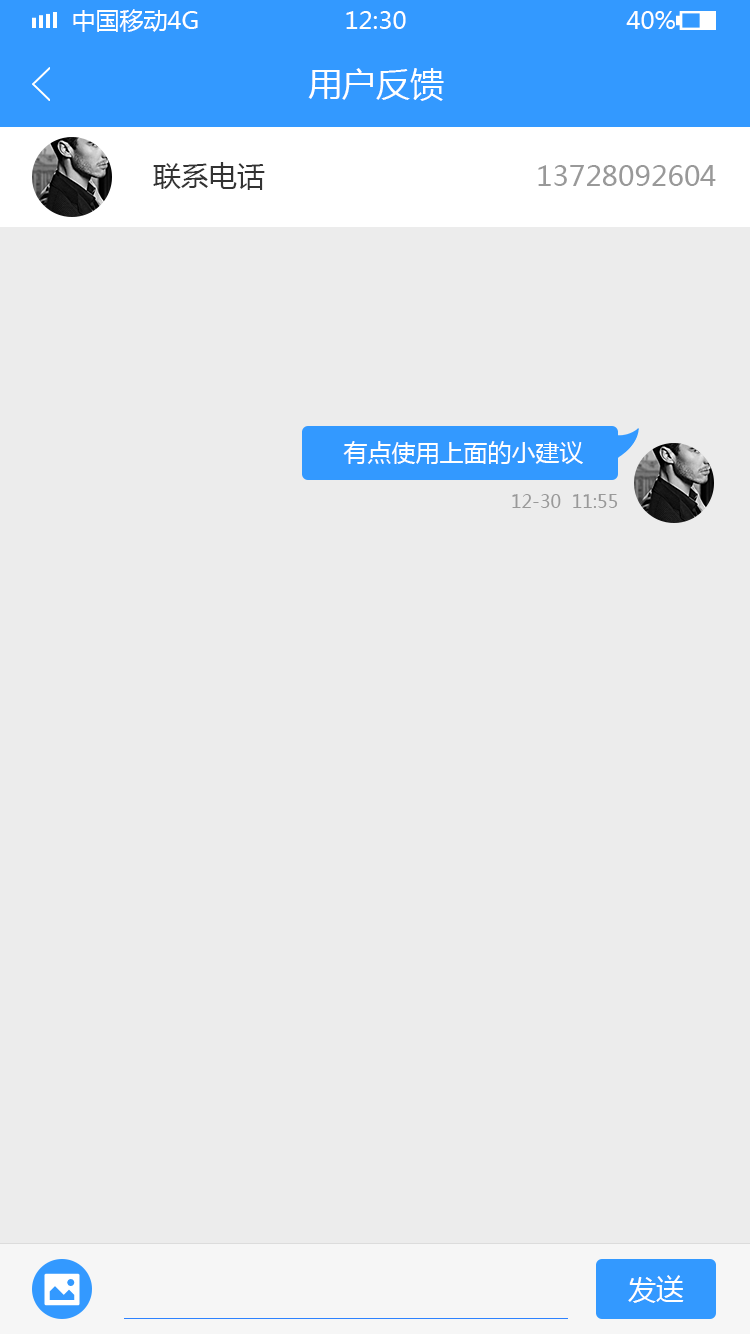
<style>
.page{position:relative;width:750px;height:1334px;background:#ececec}
.page>*{position:absolute;margin:0}
.t1{font:24px "MicrosoftYaHei";color:#ffffff;text-transform:uppercase}
.t2{font:34px "MicrosoftYaHei";color:#ffffff}
.t3{font:28px "MicrosoftYaHei";color:#333333}
.t4{font:28px "MicrosoftYaHei";color:#999999}
.t5{font:24px "MicrosoftYaHei";color:#ffffff}
.t6{font:18px "MicrosoftYaHei";color:#999999}
.t7{font:28px "MicrosoftYaHei";color:#ffffff}
</style>
<div class="page">
<p class="t1" style="left:73px;top:9px;width:125px;height:23px">中国移动4G</p>
<p class="t1" style="left:346px;top:11px;width:60px;height:18px">12:30</p>
<p class="t1" style="left:626px;top:11px;width:49px;height:18px">40%</p>
<p class="t2" style="left:308px;top:68px;width:136px;height:33px">用户反馈</p>
<p class="t3" style="left:153px;top:162px;width:112px;height:28px">联系电话</p>
<p class="t4" style="left:538px;top:165px;width:178px;height:21px">13728092604</p>
<p class="t5" style="left:343px;top:441px;width:240px;height:23px">有点使用上面的小建议</p>
<p class="t6" style="left:512px;top:494px;width:106px;height:14px">12-30  11:55</p>
<p class="t7" style="left:628px;top:1275px;width:56px;height:28px">发送</p>
</div>
